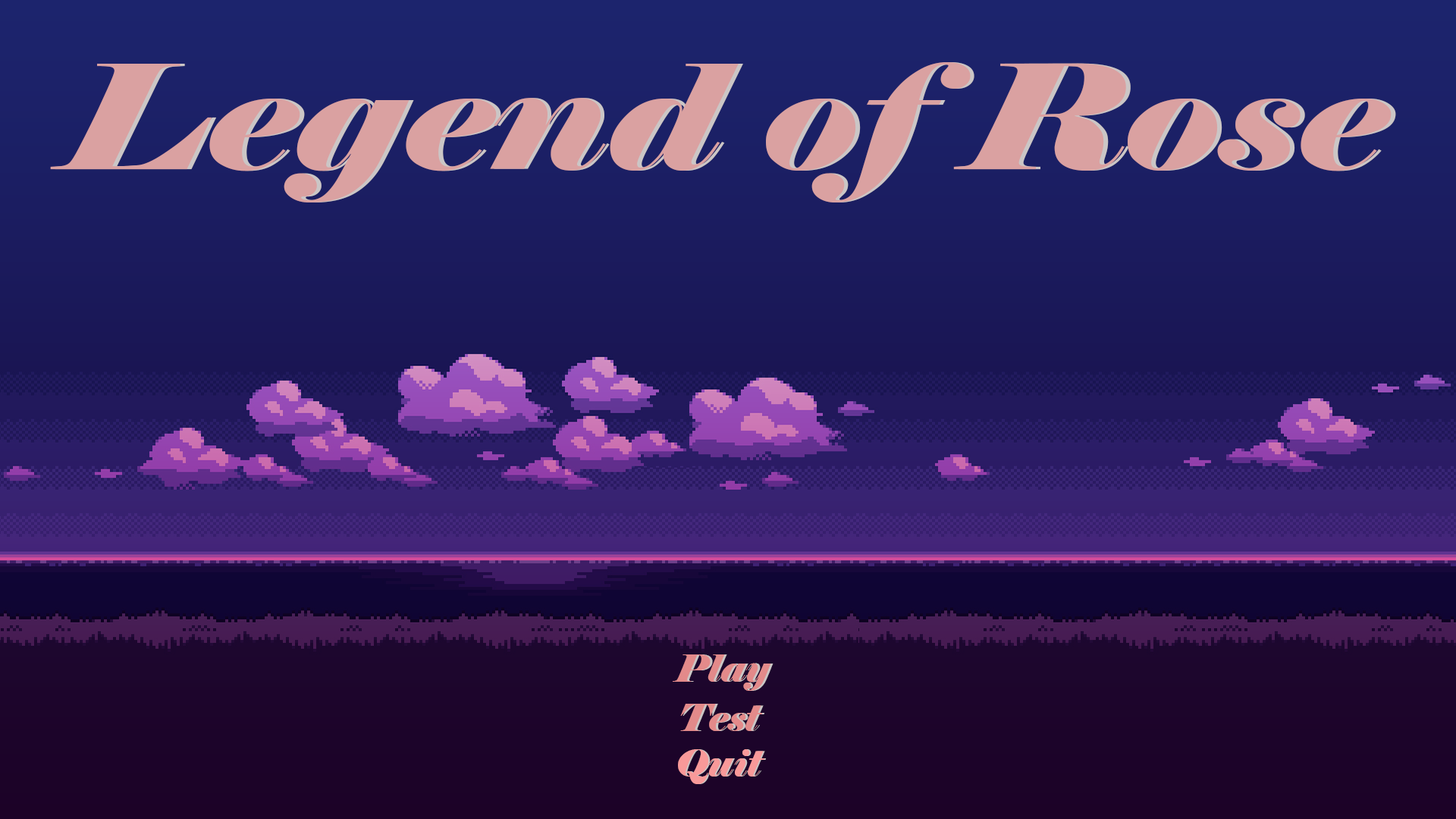
<style>
.page{position:relative;width:1456px;height:819px}
.page>*{position:absolute;margin:0}
.t1{font:145.2px "Elephant-Italic";color:#daa1a1;scale:1.19 1}
.t2{font:37.9px "Elephant-Italic";color:#e38a8a}
.t3{font:37.9px "Elephant-Italic"}
.t4{font:37.9px "Elephant-Italic";color:#f89999}
</style>
<div class="page">
<p class="t1" style="left:50px;top:62px;width:1342px;height:140px">Legend of Rose</p>
<p class="t1" style="left:55px;top:62px;width:1341px;height:140px">Legend of Rose</p>
<p class="t2" style="left:673px;top:654px;width:98px;height:37px">Play</p>
<p class="t2" style="left:675px;top:654px;width:98px;height:37px">Play</p>
<p class="t2" style="left:680px;top:704px;width:82px;height:27px">Test</p>
<p class="t3" style="left:682px;top:704px;width:82px;height:27px">Test</p>
<p class="t4" style="left:678px;top:749px;width:86px;height:35px">Quit</p>
<p class="t4" style="left:679px;top:749px;width:87px;height:35px">Quit</p>
</div>
